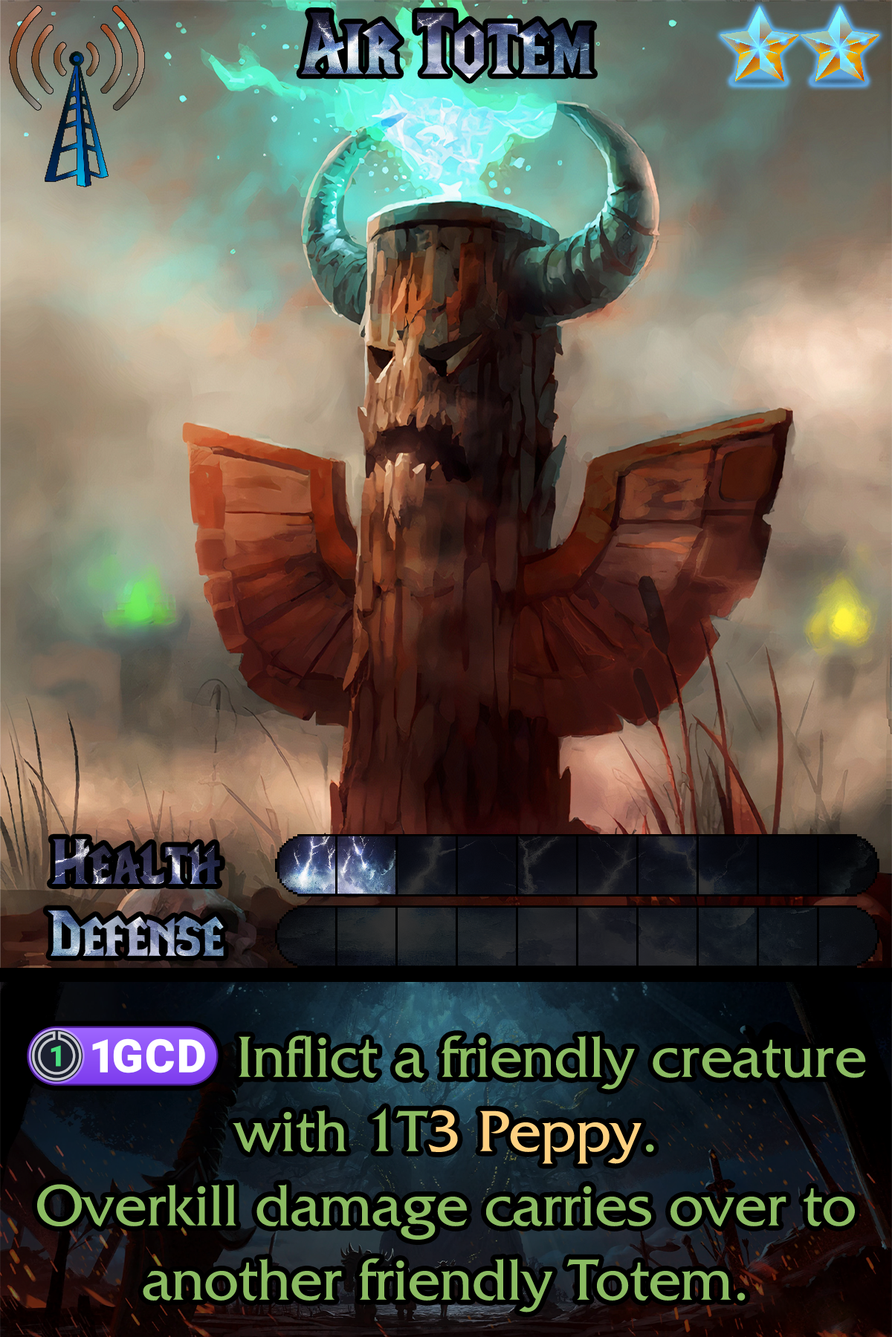
<style>
.page{position:relative;width:892px;height:1337px}
.page>*{position:absolute;margin:0}
.t1{font:148.6px "LifeCraft"}
.t2{font:109.2px "LifeCraft"}
.t3{font:110.7px "LifeCraft"}
.t4{font:104px/74.3px "FrizQuadrataStd";color:#8bbb62}
.t5{font:104px/74.3px "stoogedings-Regular";color:#8bbb62}
.t6{font:104px/74.3px "FrizQuadrataStd";color:#fed181}
</style>
<div class="page">
<p class="t1" style="left:301px;top:13px;width:292px;height:66px">Air Totem</p>
<p class="t2" style="left:51px;top:839px;width:169px;height:45px">Health</p>
<p class="t3" style="left:48px;top:910px;width:176px;height:46px">Defense</p>
<p class="t4" style="left:27px;top:1026px;width:839px;height:287px;text-align:center"><span class="t5">(1GCD)</span> Inflict a friendly creature with 1T<span class="t6">3 Peppy</span>.<br>Overkill damage carries over to another friendly Totem.</p>
</div>
